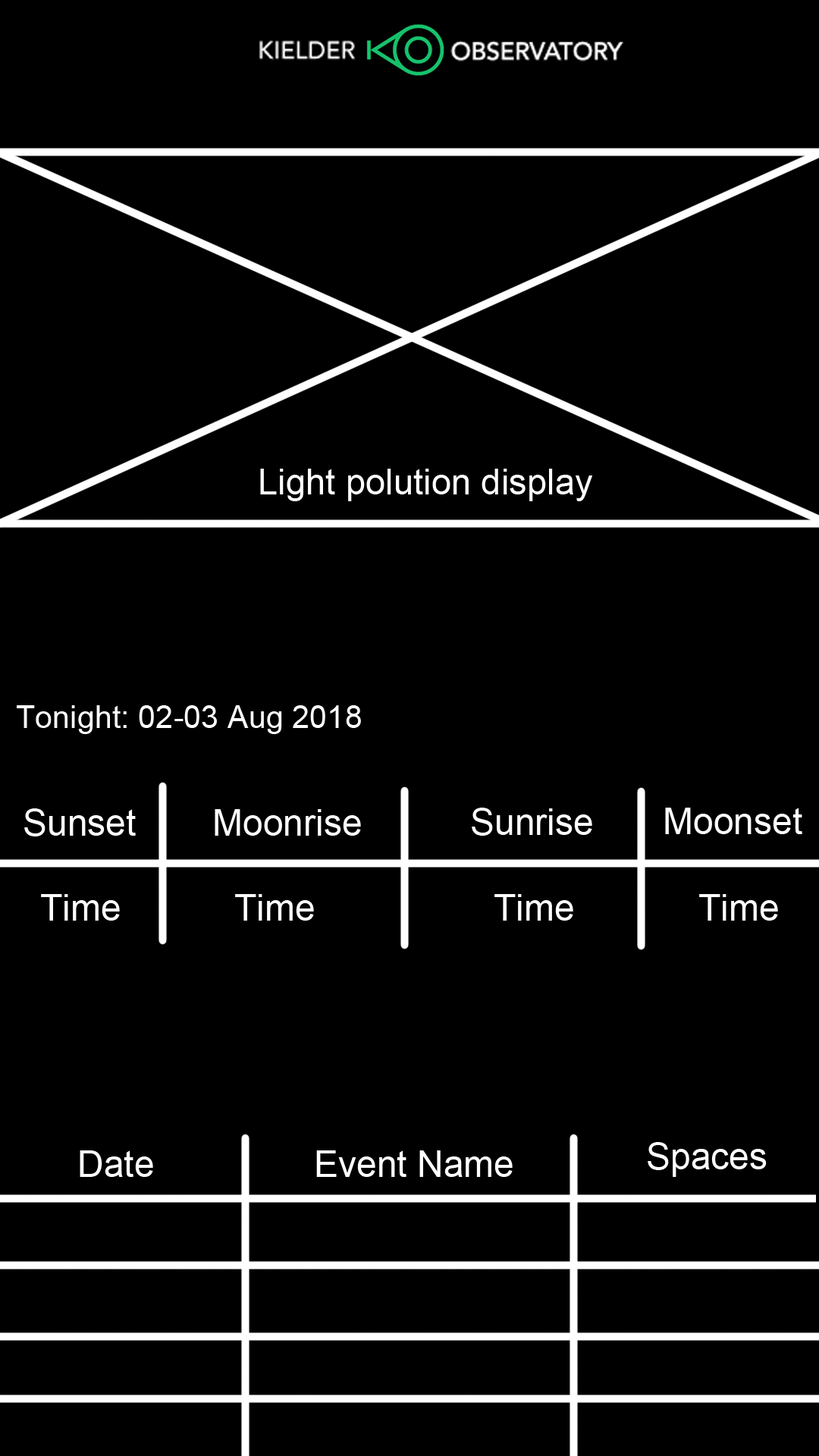
<style>
.page{position:relative;width:819px;height:1456px;background:#000000}
.page>*{position:absolute;margin:0}
.t1{font:35.8px "ArialMT";color:#ffffff}
.t2{font:31.5px "ArialMT";color:#ffffff}
.t3{font:36.4px "ArialMT";color:#ffffff}
</style>
<div class="page">
<p class="t1" style="left:260px;top:469px;width:333px;height:32px">Light polution display</p>
<p class="t2" style="left:17px;top:705px;width:344px;height:29px">Tonight: 02-03 Aug 2018</p>
<p class="t3" style="left:24px;top:808px;width:112px;height:28px">Sunset</p>
<p class="t3" style="left:215px;top:809px;width:146px;height:27px">Moonrise</p>
<p class="t3" style="left:472px;top:808px;width:120px;height:28px">Sunrise</p>
<p class="t3" style="left:665px;top:808px;width:137px;height:26px">Moonset</p>
<p class="t3" style="left:41px;top:894px;width:79px;height:27px">Time</p>
<p class="t3" style="left:235px;top:894px;width:79px;height:27px">Time</p>
<p class="t3" style="left:494px;top:894px;width:79px;height:27px">Time</p>
<p class="t3" style="left:699px;top:894px;width:79px;height:27px">Time</p>
<p class="t3" style="left:648px;top:1142px;width:119px;height:35px">Spaces</p>
<p class="t3" style="left:80px;top:1150px;width:73px;height:27px">Date</p>
<p class="t3" style="left:316px;top:1150px;width:197px;height:27px">Event Name</p>
</div>
